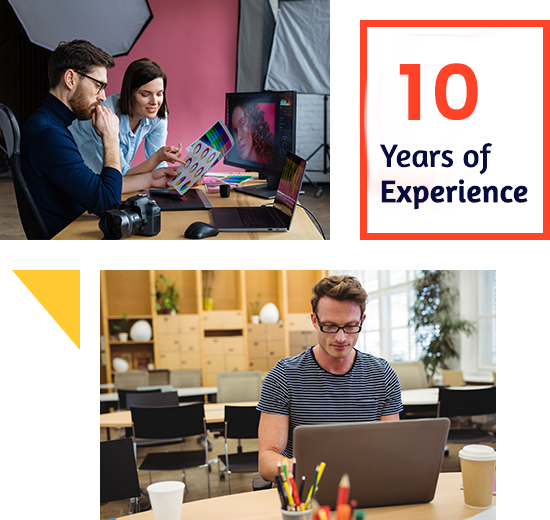
<style>
.page{position:relative;width:550px;height:520px;background:#ffffff}
.page>*{position:absolute;margin:0}
.t1{font:79px "Poppins-SemiBold";letter-spacing:0.08em;color:#ff4328;text-transform:uppercase}
.t2{font:31px/35px "Amaranth";color:#080b40;font-weight:bold}
.t3{font:33px/35px "Amaranth";color:#080b40}
</style>
<div class="page">
<p class="t1" style="left:399px;top:63px;width:79px;height:57px">10</p>
<p class="t2" style="left:380px;top:143px;width:148px;height:67px;text-align:right"><span class="t3">Years of<br></span>Experience</p>
</div>
